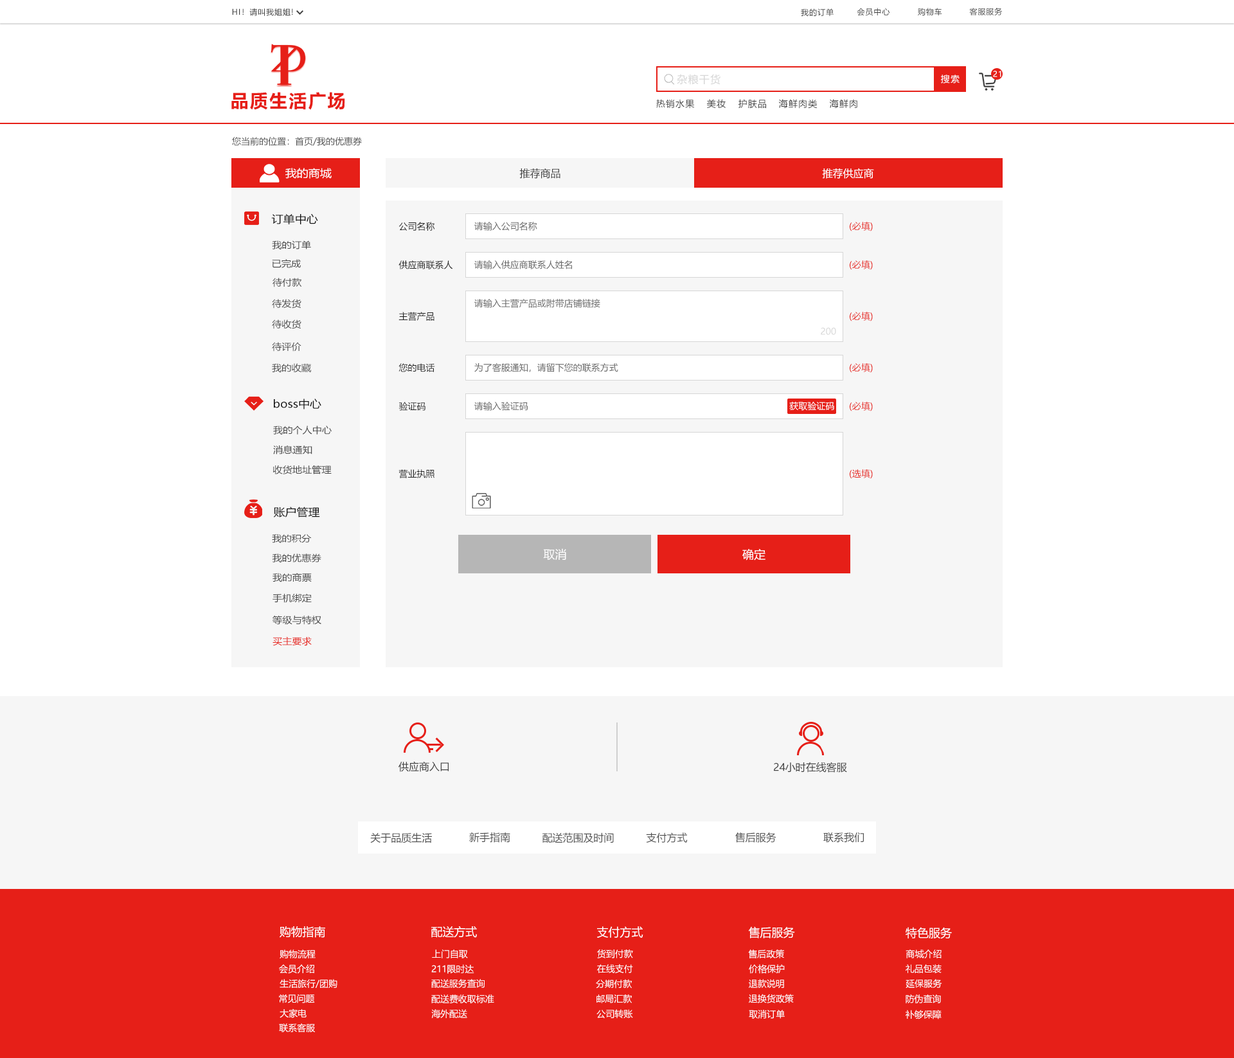
<style>
.page{position:relative;width:1234px;height:1058px;background:#ffffff}
.page>*{position:absolute;margin:0}
.t1{font:7.7px "MicrosoftYaHei";letter-spacing:0.08em;color:#404040}
.t2{font:10.3px "MicrosoftYaHei";letter-spacing:0.08em;color:#d6d6d6}
.t3{font:9px "MicrosoftYaHei";letter-spacing:0.08em;color:#ffffff}
.t4{font:7.7px "MicrosoftYaHei";letter-spacing:0.08em;color:#ffffff}
.t5{font:18px "MicrosoftYaHei-Bold";letter-spacing:0.08em;color:#e61f18}
.t6{font:9px "MicrosoftYaHei";letter-spacing:0.08em;color:#404040}
.t7{font:9px "MicrosoftYaHei";color:#505050}
.t8{font:10.6px "MicrosoftYaHei";color:#ffffff;scale:1.09 1}
.t9{font:10.3px "MicrosoftYaHei";color:#404040}
.t10{font:10.3px "MicrosoftYaHei";color:#ffffff}
.t11{font:10.6px "MicrosoftYaHei";color:#101010;scale:1.09 1}
.t12{font:9px "MicrosoftYaHei";color:#202020}
.t13{font:9px "MicrosoftYaHei";color:#666666}
.t14{font:9px "MicrosoftYaHei";color:#e61f18}
.t15{font:9px "MicrosoftYaHei";color:#484848;scale:1.09 1}
.t16{font:9px "MicrosoftYaHei";color:#d6d6d6}
.t17{font:9px "MicrosoftYaHei";color:#ffffff}
.t18{font:11.6px "MicrosoftYaHei";color:#ffffff}
.t19{font:9px "MicrosoftYaHei";color:#e61f18;scale:1.09 1}
.t20{font:10.3px "MicrosoftYaHei";color:#505050}
</style>
<div class="page">
<p class="t1" style="left:232px;top:8px;width:61px;height:8px">HI！请叫我姐姐!</p>
<p class="t1" style="left:801px;top:8px;width:33px;height:8px">我的订单</p>
<p class="t1" style="left:857px;top:8px;width:33px;height:8px">会员中心</p>
<p class="t1" style="left:918px;top:8px;width:24px;height:8px">购物车</p>
<p class="t1" style="left:969px;top:8px;width:34px;height:7px">客服服务</p>
<p class="t2" style="left:677px;top:74px;width:44px;height:11px">杂粮干货</p>
<p class="t3" style="left:941px;top:75px;width:19px;height:9px">搜索</p>
<p class="t4" style="left:993px;top:71px;width:9px;height:6px">21</p>
<p class="t5" style="left:231px;top:92px;width:114px;height:18px">品质生活广场</p>
<p class="t6" style="left:656px;top:99px;width:39px;height:10px">热销水果</p>
<p class="t6" style="left:707px;top:99px;width:19px;height:9px">美妆</p>
<p class="t6" style="left:739px;top:99px;width:27px;height:10px">护肤品</p>
<p class="t6" style="left:779px;top:99px;width:39px;height:10px">海鲜肉类</p>
<p class="t6" style="left:829px;top:99px;width:29px;height:10px">海鲜肉</p>
<p class="t7" style="left:232px;top:137px;width:130px;height:9px">您当前的位置：首页/我的优惠券</p>
<p class="t8" style="left:285px;top:168px;width:47px;height:11px">我的商城</p>
<p class="t9" style="left:519px;top:168px;width:42px;height:11px">推荐商品</p>
<p class="t10" style="left:822px;top:168px;width:52px;height:11px">推荐供应商</p>
<p class="t11" style="left:271px;top:213px;width:47px;height:11px">订单中心</p>
<p class="t12" style="left:399px;top:222px;width:36px;height:9px">公司名称</p>
<p class="t13" style="left:474px;top:222px;width:63px;height:9px">请输入公司名称</p>
<p class="t14" style="left:850px;top:222px;width:23px;height:9px">(必填)</p>
<p class="t15" style="left:272px;top:240px;width:39px;height:9px">我的订单</p>
<p class="t15" style="left:272px;top:259px;width:29px;height:9px">已完成</p>
<p class="t12" style="left:399px;top:260px;width:54px;height:9px">供应商联系人</p>
<p class="t13" style="left:474px;top:260px;width:98px;height:9px">请输入供应商联系人姓名</p>
<p class="t14" style="left:850px;top:260px;width:23px;height:10px">(必填)</p>
<p class="t15" style="left:273px;top:278px;width:29px;height:9px">待付款</p>
<p class="t15" style="left:272px;top:299px;width:30px;height:10px">待发货</p>
<p class="t13" style="left:474px;top:299px;width:126px;height:9px">请输入主营产品或附带店铺链接</p>
<p class="t12" style="left:399px;top:312px;width:36px;height:9px">主营产品</p>
<p class="t14" style="left:850px;top:312px;width:23px;height:9px">(必填)</p>
<p class="t15" style="left:272px;top:320px;width:30px;height:9px">待收货</p>
<p class="t16" style="left:821px;top:327px;width:15px;height:8px">200</p>
<p class="t15" style="left:272px;top:342px;width:30px;height:10px">待评价</p>
<p class="t15" style="left:272px;top:363px;width:39px;height:10px">我的收藏</p>
<p class="t12" style="left:399px;top:363px;width:36px;height:9px">您的电话</p>
<p class="t13" style="left:474px;top:363px;width:144px;height:9px">为了客服通知，请留下您的联系方式</p>
<p class="t14" style="left:850px;top:363px;width:23px;height:10px">(必填)</p>
<p class="t11" style="left:274px;top:399px;width:47px;height:11px">boss中心</p>
<p class="t12" style="left:399px;top:402px;width:27px;height:9px">验证码</p>
<p class="t13" style="left:474px;top:402px;width:54px;height:9px">请输入验证码</p>
<p class="t17" style="left:789px;top:402px;width:45px;height:9px">获取验证码</p>
<p class="t14" style="left:850px;top:402px;width:23px;height:9px">(必填)</p>
<p class="t15" style="left:273px;top:426px;width:59px;height:9px">我的个人中心</p>
<p class="t15" style="left:273px;top:446px;width:39px;height:9px">消息通知</p>
<p class="t15" style="left:273px;top:465px;width:59px;height:9px">收货地址管理</p>
<p class="t12" style="left:399px;top:469px;width:36px;height:9px">营业执照</p>
<p class="t14" style="left:850px;top:469px;width:23px;height:10px">(选填)</p>
<p class="t11" style="left:273px;top:507px;width:47px;height:11px">账户管理</p>
<p class="t15" style="left:272px;top:534px;width:40px;height:9px">我的积分</p>
<p class="t15" style="left:272px;top:554px;width:49px;height:8px">我的优惠券</p>
<p class="t18" style="left:543px;top:548px;width:23px;height:12px">取消</p>
<p class="t18" style="left:742px;top:549px;width:24px;height:12px">确定</p>
<p class="t15" style="left:273px;top:573px;width:39px;height:9px">我的商票</p>
<p class="t15" style="left:273px;top:593px;width:39px;height:10px">手机绑定</p>
<p class="t15" style="left:273px;top:615px;width:48px;height:10px">等级与特权</p>
<p class="t19" style="left:273px;top:636px;width:39px;height:10px">买主要求</p>
<p class="t9" style="left:399px;top:761px;width:50px;height:11px">供应商入口</p>
<p class="t9" style="left:774px;top:762px;width:73px;height:11px">24小时在线客服</p>
<p class="t20" style="left:370px;top:833px;width:62px;height:10px">关于品质生活</p>
<p class="t20" style="left:469px;top:832px;width:41px;height:11px">新手指南</p>
<p class="t20" style="left:543px;top:833px;width:71px;height:10px">配送范围及时间</p>
<p class="t20" style="left:646px;top:833px;width:42px;height:10px">支付方式</p>
<p class="t20" style="left:735px;top:833px;width:42px;height:10px">售后服务</p>
<p class="t20" style="left:824px;top:833px;width:40px;height:10px">联系我们</p>
<p class="t18" style="left:280px;top:926px;width:45px;height:12px">购物指南</p>
<p class="t18" style="left:431px;top:926px;width:46px;height:12px">配送方式</p>
<p class="t18" style="left:597px;top:926px;width:47px;height:12px">支付方式</p>
<p class="t18" style="left:748px;top:926px;width:47px;height:13px">售后服务</p>
<p class="t18" style="left:906px;top:927px;width:46px;height:12px">特色服务</p>
<p class="t17" style="left:280px;top:950px;width:36px;height:9px">购物流程</p>
<p class="t17" style="left:432px;top:950px;width:36px;height:9px">上门自取</p>
<p class="t17" style="left:597px;top:950px;width:36px;height:9px">货到付款</p>
<p class="t17" style="left:748px;top:950px;width:36px;height:9px">售后政策</p>
<p class="t17" style="left:906px;top:950px;width:36px;height:9px">商城介绍</p>
<p class="t17" style="left:279px;top:964px;width:35px;height:10px">会员介绍</p>
<p class="t17" style="left:431px;top:964px;width:43px;height:10px">211限时达</p>
<p class="t17" style="left:597px;top:964px;width:36px;height:9px">在线支付</p>
<p class="t17" style="left:749px;top:964px;width:36px;height:10px">价格保护</p>
<p class="t17" style="left:906px;top:964px;width:36px;height:9px">礼品包装</p>
<p class="t17" style="left:280px;top:979px;width:58px;height:9px">生活旅行/团购</p>
<p class="t17" style="left:431px;top:979px;width:54px;height:9px">配送服务查询</p>
<p class="t17" style="left:596px;top:979px;width:36px;height:10px">分期付款</p>
<p class="t17" style="left:749px;top:979px;width:35px;height:10px">退款说明</p>
<p class="t17" style="left:906px;top:979px;width:36px;height:9px">延保服务</p>
<p class="t17" style="left:279px;top:995px;width:36px;height:9px">常见问题</p>
<p class="t17" style="left:431px;top:995px;width:63px;height:9px">配送费收取标准</p>
<p class="t17" style="left:597px;top:995px;width:35px;height:9px">邮局汇款</p>
<p class="t17" style="left:749px;top:994px;width:45px;height:10px">退换货政策</p>
<p class="t17" style="left:906px;top:995px;width:35px;height:9px">防伪查询</p>
<p class="t17" style="left:280px;top:1009px;width:27px;height:9px">大家电</p>
<p class="t17" style="left:431px;top:1009px;width:36px;height:9px">海外配送</p>
<p class="t17" style="left:597px;top:1009px;width:36px;height:10px">公司转账</p>
<p class="t17" style="left:749px;top:1010px;width:36px;height:9px">取消订单</p>
<p class="t17" style="left:906px;top:1010px;width:36px;height:10px">补够保障</p>
<p class="t17" style="left:279px;top:1023px;width:36px;height:9px">联系客服</p>
</div>
